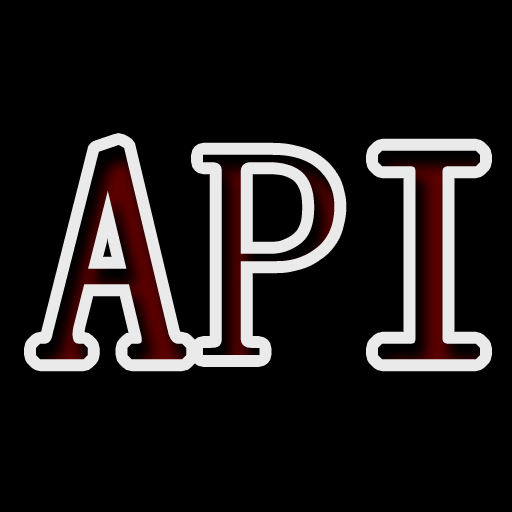
<style>
.page{position:relative;width:512px;height:512px;background:#000000}
.page>*{position:absolute;margin:0}
.t1{font:300px "SimSun";font-weight:bold}
</style>
<div class="page">
<p class="t1" style="left:36px;top:145px;width:444px;height:215px">API</p>
</div>
